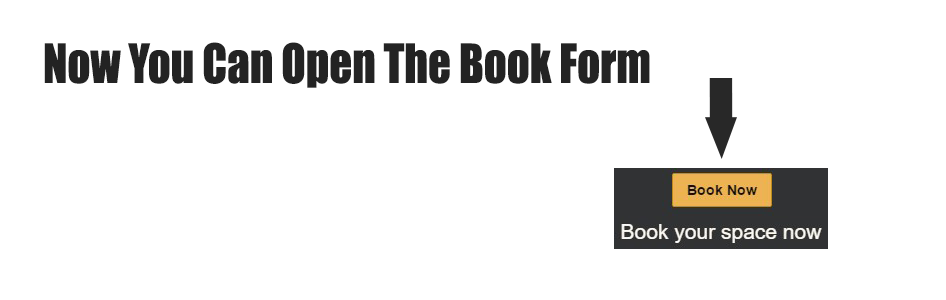
<style>
.page{position:relative;width:946px;height:300px;background:#ffffff}
.page>*{position:absolute;margin:0}
.t1{font:50px "Impact";color:#232323;scale:0.9 1}
</style>
<div class="page">
<p class="t1" style="left:44px;top:42px;width:606px;height:46px">Now You Can Open The Book Form</p>
</div>
